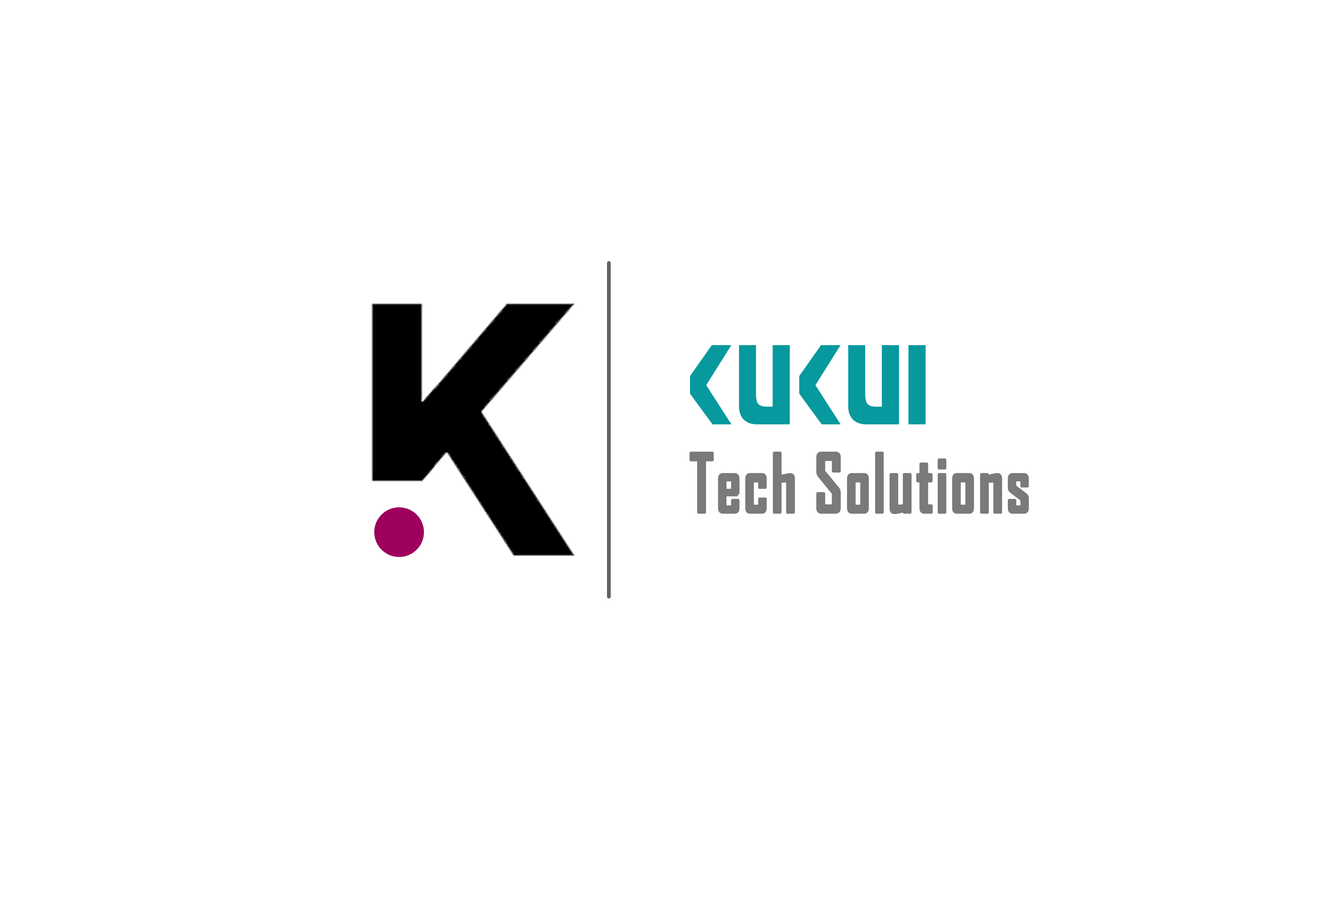
<style>
.page{position:relative;width:1329px;height:897px;background:#ffffff}
.page>*{position:absolute;margin:0}
.t1{font:109.9px "Comaro-Normal";letter-spacing:0.02em;color:#06999e;scale:0.78 1}
.t2{font:78.5px "AgencyFB-Bold";letter-spacing:0.02em;color:#7a7a7a;font-weight:bold;scale:0.78 1}
</style>
<div class="page">
<p class="t1" style="left:690px;top:345px;width:236px;height:80px">KUKUI</p>
<p class="t2" style="left:689px;top:452px;width:340px;height:62px">Tech Solutions</p>
</div>
